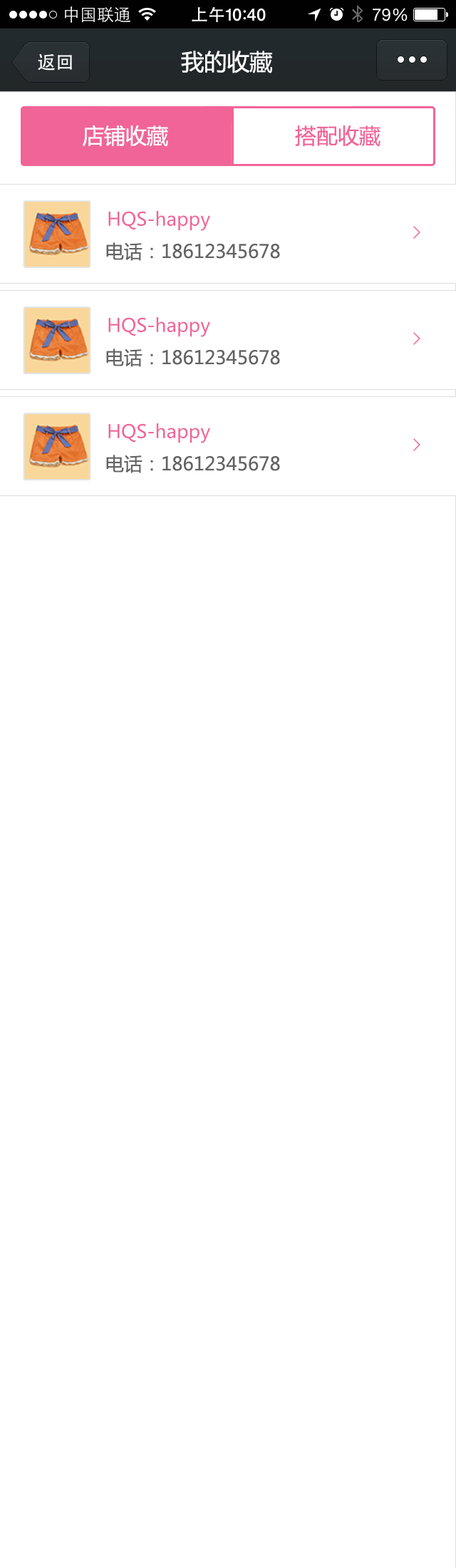
<style>
.page{position:relative;width:456px;height:1568px;background:#ffffff}
.page>*{position:absolute;margin:0}
.t1{font:22.8px "MicrosoftYaHei";color:#ffffff}
.t2{font:21.4px "MicrosoftYaHei";color:#ffffff}
.t3{font:21.4px "MicrosoftYaHei";color:#f16498}
.t4{font:18.5px "MicrosoftYaHei";color:#f16498}
.t5{font:18.5px "MicrosoftYaHei";color:#636363}
</style>
<div class="page">
<p class="t1" style="left:181px;top:51px;width:91px;height:22px">我的收藏</p>
<p class="t2" style="left:83px;top:125px;width:85px;height:22px">店铺收藏</p>
<p class="t3" style="left:295px;top:125px;width:86px;height:22px">搭配收藏</p>
<p class="t4" style="left:108px;top:211px;width:102px;height:20px">HQS-happy</p>
<p class="t5" style="left:106px;top:242px;width:174px;height:19px">电话：18612345678</p>
<p class="t4" style="left:108px;top:317px;width:102px;height:20px">HQS-happy</p>
<p class="t5" style="left:106px;top:349px;width:174px;height:18px">电话：18612345678</p>
<p class="t4" style="left:108px;top:423px;width:102px;height:20px">HQS-happy</p>
<p class="t5" style="left:106px;top:455px;width:174px;height:18px">电话：18612345678</p>
</div>
